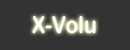
<style>
.page{position:relative;width:130px;height:50px;background:#333333}
.page>*{position:absolute;margin:0}
.t1{font:23.5px "ArialRoundedMTBold";color:#ffffff;scale:0.9 1}
</style>
<div class="page">
<p class="t1" style="left:32px;top:16px;width:64px;height:18px">X-Volu</p>
</div>
